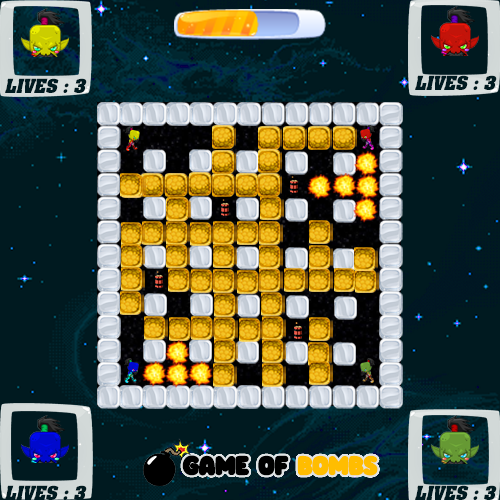
<style>
.page{position:relative;width:500px;height:500px;background:#001a20}
.page>*{position:absolute;margin:0}
.t1{font:16.3px "BillboardItalicSWFTE";color:#001a20}
.t2{font:26.2px "Knicknack-Bold";letter-spacing:-0.025em;color:#000000;text-transform:uppercase;font-weight:bold;scale:1.04 1}
.t3{font:26.2px "Knicknack-Bold";letter-spacing:-0.025em;color:#ffbd00;text-transform:uppercase;font-weight:bold;scale:1.04 1}
</style>
<div class="page">
<p class="t1" style="left:5px;top:78px;width:82px;height:15px">LIVES : 3</p>
<p class="t1" style="left:415px;top:75px;width:82px;height:15px">LIVES : 3</p>
<p class="t2" style="left:182px;top:455px;width:196px;height:21px">game of <span class="t3">bombs</span></p>
<p class="t1" style="left:5px;top:485px;width:82px;height:15px">LIVES : 3</p>
<p class="t1" style="left:415px;top:485px;width:82px;height:15px">LIVES : 3</p>
</div>
